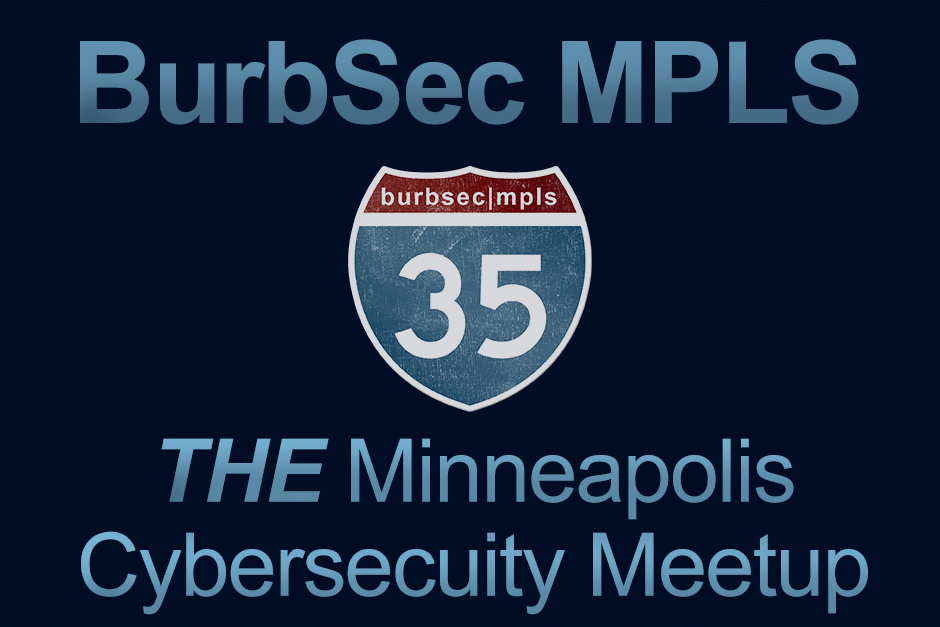
<style>
.page{position:relative;width:940px;height:627px;background:#010d25}
.page>*{position:absolute;margin:0}
.t1{font:114px "Arial-BoldMT";letter-spacing:-0.02em;color:#527e9a}
.t2{font:88px/94px "ArialMT";letter-spacing:-0.02em;color:#6396b4}
.t3{font:88px/94px "Arial-BoldItalicMT";letter-spacing:-0.02em;color:#6396b4}
</style>
<div class="page">
<p class="t1" style="left:80px;top:39px;width:779px;height:86px">BurbSec MPLS</p>
<p class="t2" style="left:81px;top:438px;width:787px;height:177px;text-align:center"><span class="t3">THE</span> Minneapolis<br>Cybersecuity Meetup</p>
</div>
